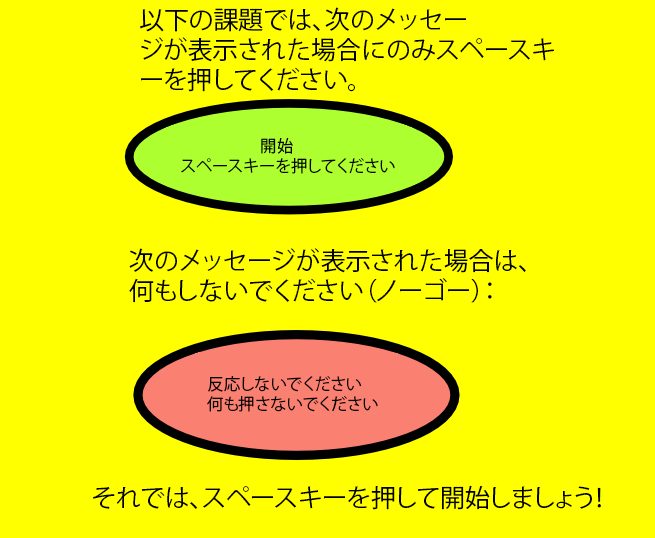
<style>
.page{position:relative;width:655px;height:538px;background:#ffff00}
.page>*{position:absolute;margin:0}
.t1{font:25px "KozGoPr6N-Regular";color:#000000}
.t2{font:16.3px "KozGoPr6N-Regular";color:#000000}
</style>
<div class="page">
<p class="t1" style="left:139px;top:7px;width:415px;height:85px">以下の課題では、次のメッセー<br>ジが表示された場合にのみスペースキ<br>ーを押してください。</p>
<p class="t2" style="left:181px;top:138px;width:214px;height:36px">开始<br>スペースキーを押してください</p>
<p class="t1" style="left:129px;top:248px;width:397px;height:55px">次のメッセージが表示された場合は、<br>何もしないでください（ノーゴー）：</p>
<p class="t2" style="left:207px;top:376px;width:171px;height:36px">反応しないでください<br>何も押さないでください</p>
<p class="t1" style="left:93px;top:485px;width:508px;height:25px">それでは、スペースキーを押して開始しましょう！</p>
</div>
